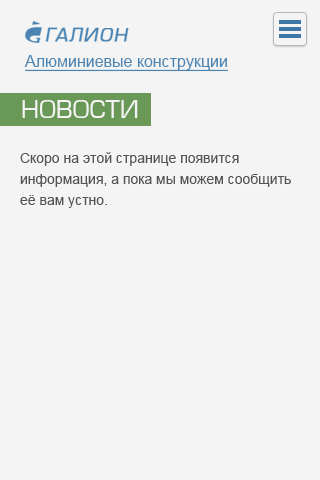
<style>
.page{position:relative;width:320px;height:480px;background:#f4f4f4}
.page>*{position:absolute;margin:0}
.t1{font:16px "ArialMT";color:#4a84b2;text-decoration:underline}
.t2{font:24px "EuropeNormal";color:#f4f4f4;text-transform:uppercase}
.t3{font:14px/21px "ArialMT";color:#545454}
</style>
<div class="page">
<p class="t1" style="left:24px;top:55px;width:204px;height:17px">Алюминиевые конструкции</p>
<p class="t2" style="left:22px;top:100px;width:116px;height:18px">НОВОСТИ</p>
<p class="t3" style="left:20px;top:152px;width:271px;height:56px">Скоро на этой странице появится <br>информация, а пока мы можем сообщить<br>её вам устно.</p>
</div>
